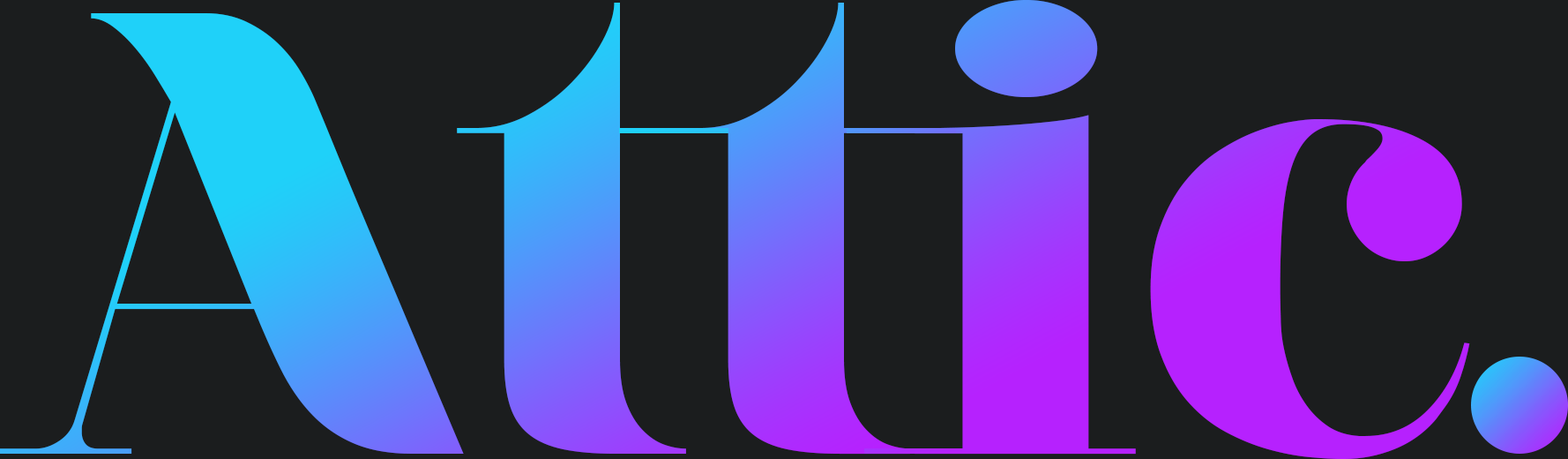
<style>
.page{position:relative;width:1568px;height:459px;background:#1b1d1e}
.page>*{position:absolute;margin:0}
.t1{font:628.3px "NouvelleVague-Black"}
</style>
<div class="page">
<p class="t1" style="left:0px;top:0px;width:1470px;height:459px">Attic</p>
</div>
